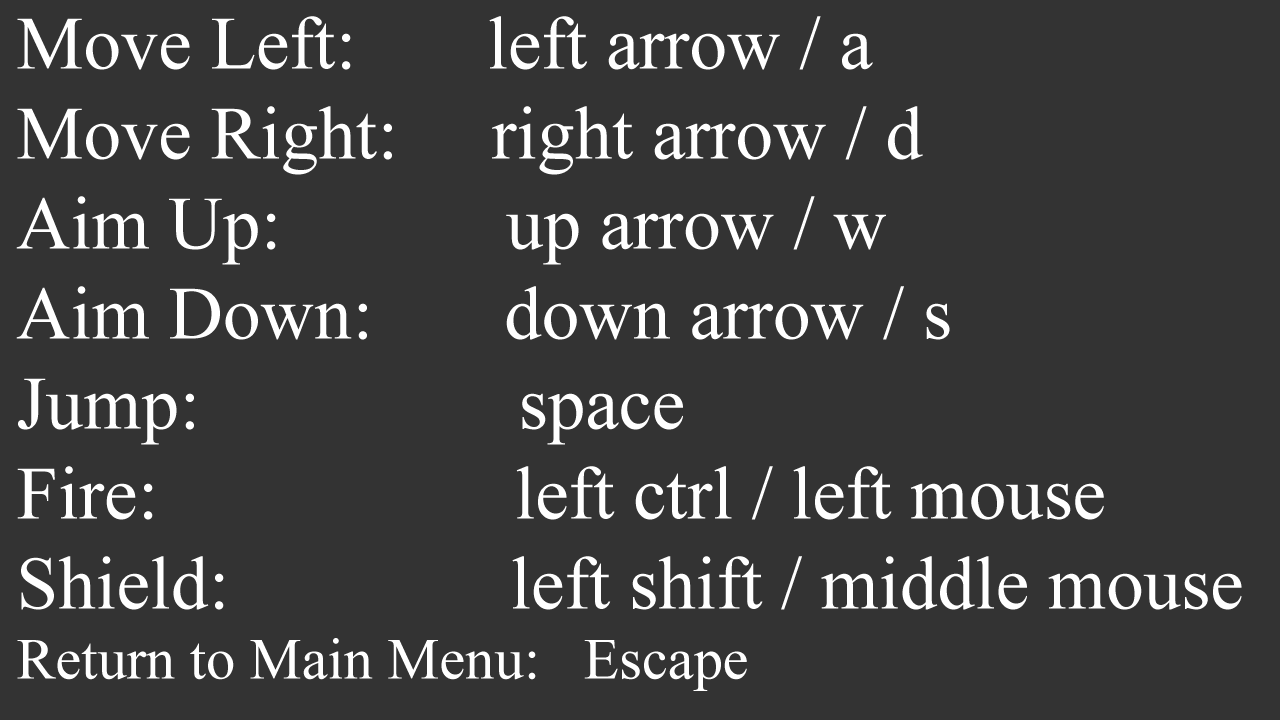
<style>
.page{position:relative;width:1280px;height:720px;background:#333333}
.page>*{position:absolute;margin:0}
.t1{font:75px "TimesNewRomanPSMT";color:#ffffff}
.t2{font:58.3px "TimesNewRomanPSMT";color:#ffffff}
</style>
<div class="page">
<p class="t1" style="left:16px;top:16px;width:1226px;height:675px">Move Left:       left arrow / a<br>Move Right:     right arrow / d<br>Aim Up:            up arrow / w<br>Aim Down:       down arrow / s<br>Jump:                 space<br>Fire:                   left ctrl / left mouse<br>Shield:               left shift / middle mouse<br><span class="t2">Return to Main Menu:   Escape</span></p>
</div>
